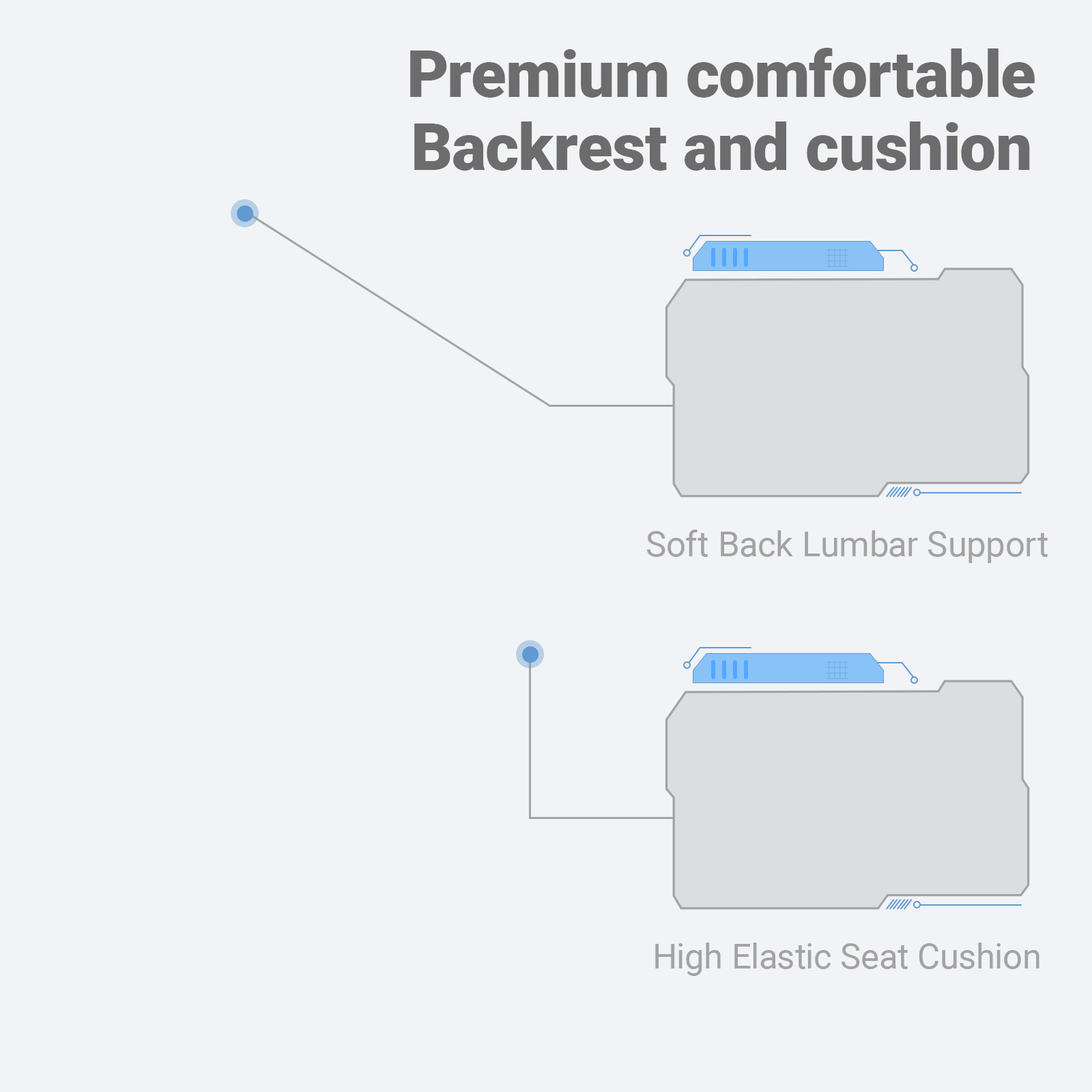
<style>
.page{position:relative;width:1092px;height:1092px;background:#f2f3f6}
.page>*{position:absolute;margin:0}
.t1{font:64.6px/72.8px "Roboto-Black";color:#6c6c6c}
.t2{font:34.9px "Roboto-Regular";color:#a3a3a3}
</style>
<div class="page">
<p class="t1" style="left:410px;top:48px;width:625px;height:123px;text-align:center">Premium comfortable<br>Backrest and cushion</p>
<p class="t2" style="left:647px;top:530px;width:401px;height:33px">Soft Back Lumbar Support</p>
<p class="t2" style="left:655px;top:943px;width:384px;height:33px">High Elastic Seat Cushion</p>
</div>
